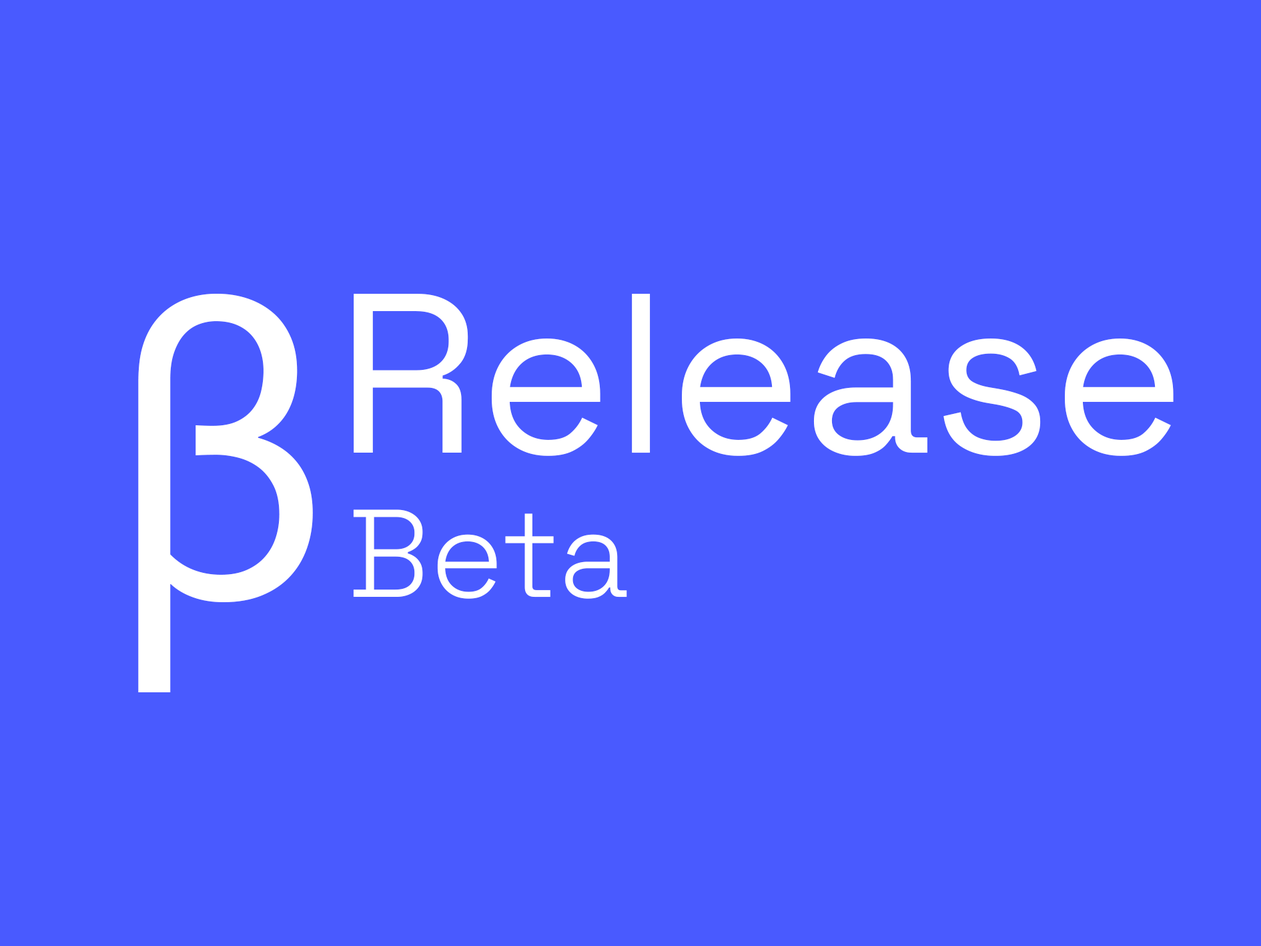
<style>
.page{position:relative;width:1261px;height:946px;background:#495aff}
.page>*{position:absolute;margin:0}
.t1{font:421px "Corbel";color:#ffffff}
.t2{font:226.7px "SpaceGrotesk-Regular";color:#ffffff}
.t3{font:124.4px "SpaceGrotesk-Light";color:#ffffff}
</style>
<div class="page">
<p class="t1" style="left:138px;top:294px;width:175px;height:398px">β</p>
<p class="t2" style="left:354px;top:294px;width:820px;height:162px">Release</p>
<p class="t3" style="left:353px;top:509px;width:274px;height:90px">Beta</p>
</div>
